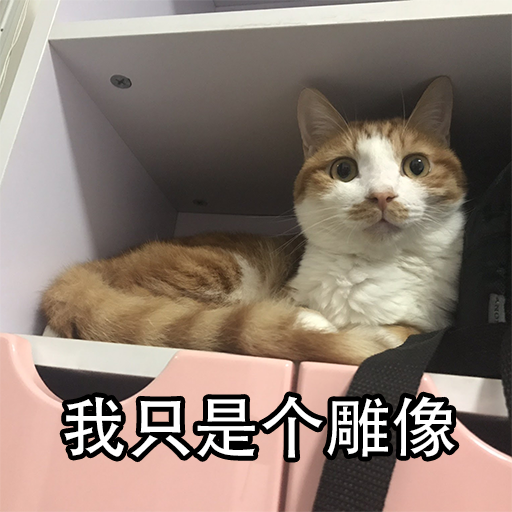
<style>
.page{position:relative;width:512px;height:512px}
.page>*{position:absolute;margin:0}
.t1{font:66px "AdobeHeitiStd-Regular";color:#ffffff}
</style>
<div class="page">
<p class="t1" style="left:64px;top:396px;width:391px;height:62px">我只是个雕像</p>
</div>
